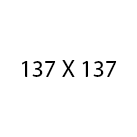
<style>
.page{position:relative;width:137px;height:137px;background:#ffffff}
.page>*{position:absolute;margin:0}
.t1{font:24px "MyriadPro-Regular";color:#000000}
</style>
<div class="page">
<p class="t1" style="left:22px;top:60px;width:95px;height:17px">137 X 137</p>
</div>
